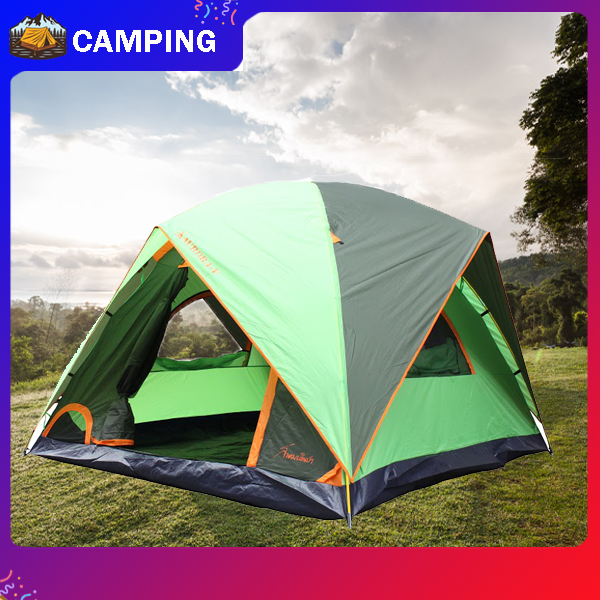
<style>
.page{position:relative;width:600px;height:600px}
.page>*{position:absolute;margin:0}
.t1{font:33.3px "FranklinGothic-Demi";letter-spacing:0.015em;color:#fdfdfc}
</style>
<div class="page">
<p class="t1" style="left:73px;top:30px;width:142px;height:22px">CAMPING</p>
</div>
